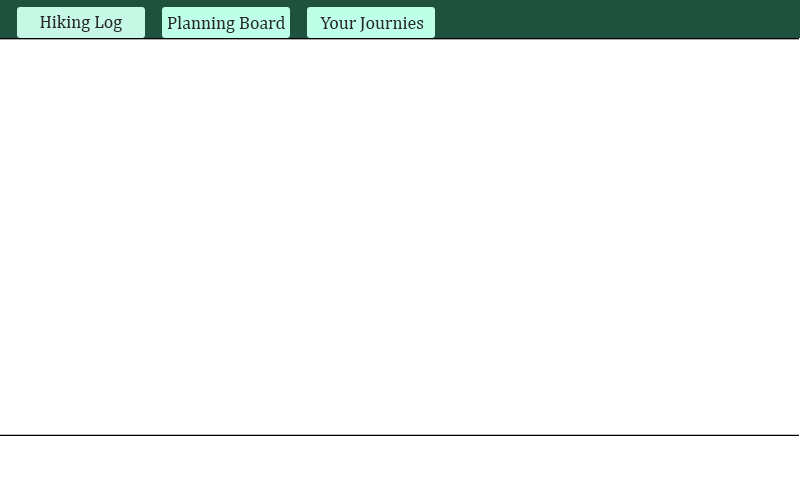
<style>
.page{position:relative;width:800px;height:500px;background:#ffffff}
.page>*{position:absolute;margin:0}
.t1{font:18px "Cambria";color:#292929}
</style>
<div class="page">
<p class="t1" style="left:40px;top:15px;width:83px;height:17px">Hiking Log</p>
<p class="t1" style="left:167px;top:16px;width:118px;height:17px">Planning Board</p>
<p class="t1" style="left:320px;top:17px;width:104px;height:15px">Your Journies</p>
</div>
